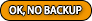
<style>
.page{position:relative;width:92px;height:21px}
.page>*{position:absolute;margin:0}
.t1{font:10px "AdobeHeitiStd-Regular";color:#ffffff}
</style>
<div class="page">
<p class="t1" style="left:9px;top:6px;width:73px;height:10px">OK, NO BACKUP</p>
</div>
